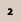
<style>
.page{position:relative;width:21px;height:21px;background:#d9cdc1}
.page>*{position:absolute;margin:0}
.t1{font:9px "Tahoma-Bold";color:#000000}
</style>
<div class="page">
<p class="t1" style="left:7px;top:8px;width:6px;height:7px">2</p>
</div>
